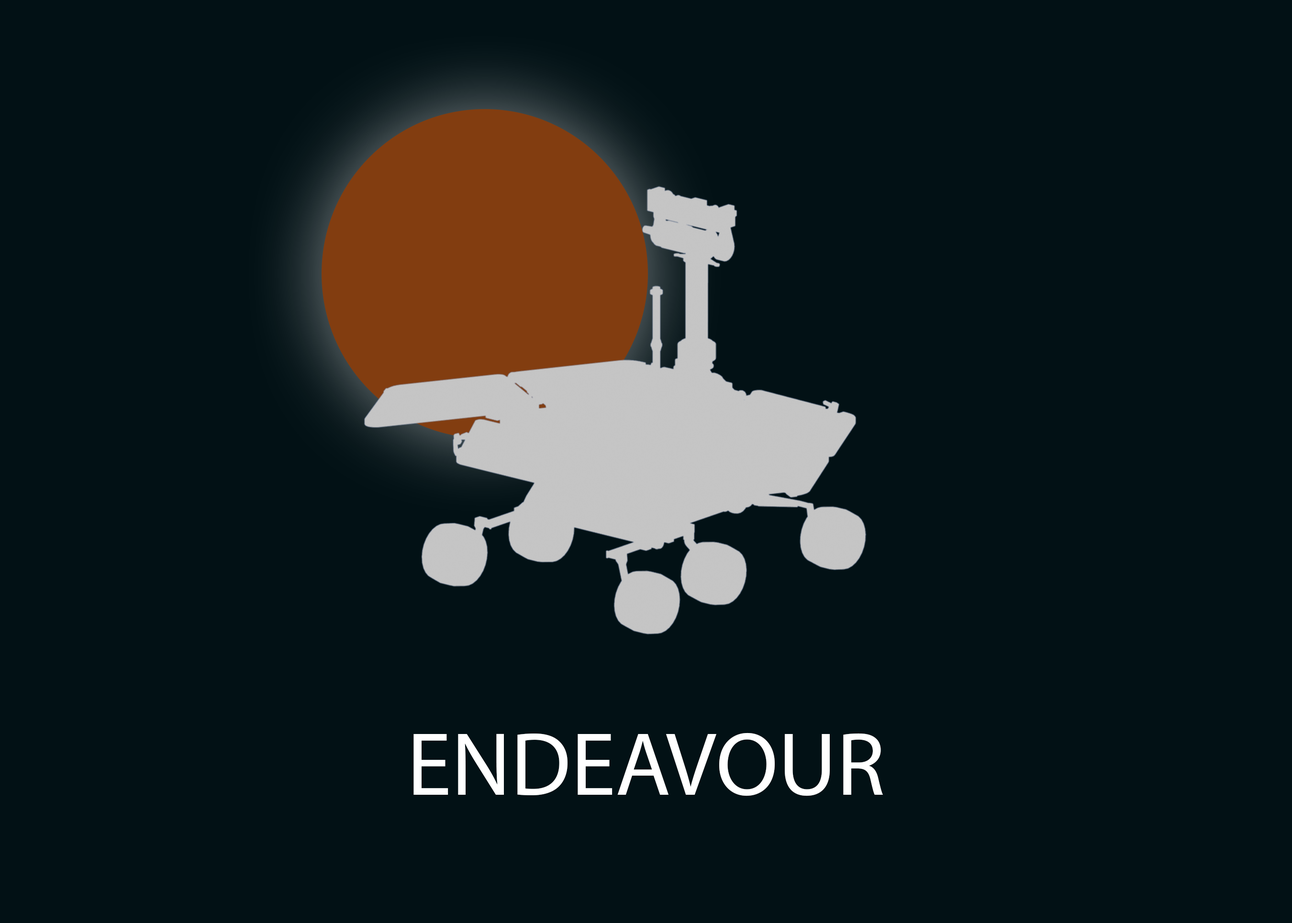
<style>
.page{position:relative;width:1292px;height:923px;background:#021115}
.page>*{position:absolute;margin:0}
.t1{font:90.3px "MyriadPro-Regular";color:#ffffff}
</style>
<div class="page">
<p class="t1" style="left:413px;top:733px;width:470px;height:63px">ENDEAVOUR</p>
</div>
